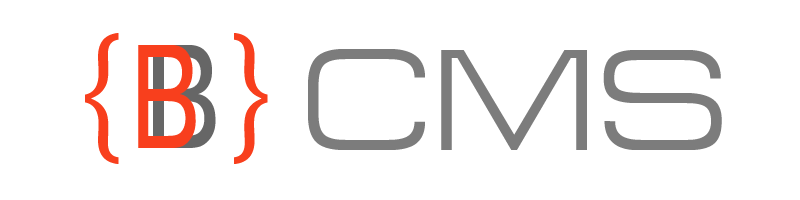
<style>
.page{position:relative;width:800px;height:200px;background:#ffffff}
.page>*{position:absolute;margin:0}
.t1{font:144px "ft72-Cyrillic";color:#f83f1d;text-transform:uppercase}
.t2{font:144px "ft86-Plain";color:#f83f1d;scale:0.72 1}
.t3{font:144px "ft86-Plain";color:#666666;text-transform:uppercase;scale:0.78 1}
.t4{font:144px "ft91-Normal";color:#7c7c7c;text-transform:uppercase}
</style>
<div class="page">
<p class="t1" style="left:85px;top:33px;width:183px;height:131px">{  }</p>
<p class="t2" style="left:138px;top:45px;width:58px;height:103px">B</p>
<p class="t3" style="left:153px;top:45px;width:63px;height:103px">B</p>
<p class="t4" style="left:308px;top:49px;width:414px;height:101px">CMS</p>
</div>
